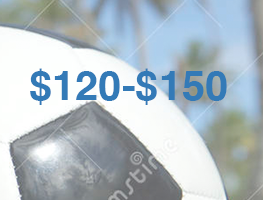
<style>
.page{position:relative;width:263px;height:200px}
.page>*{position:absolute;margin:0}
.t1{font:41.7px "Helvetica-Bold";color:#337ab7}
</style>
<div class="page">
<p class="t1" style="left:30px;top:68px;width:197px;height:37px">$120-$150</p>
</div>
